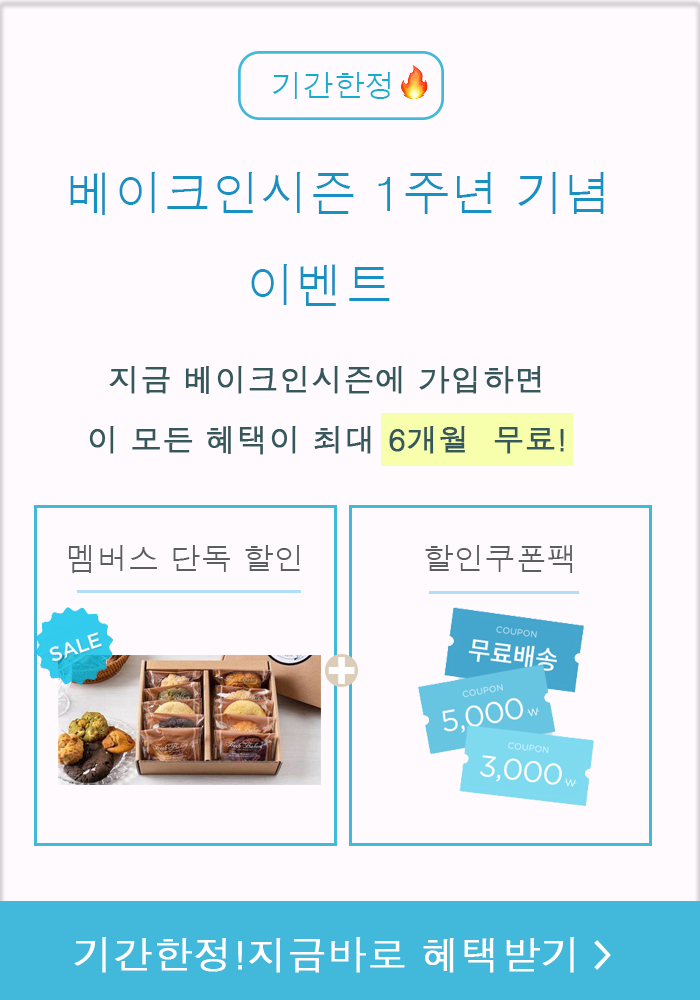
<style>
.page{position:relative;width:700px;height:1000px;background:#fffafe}
.page>*{position:absolute;margin:0}
.t1{font:31.1px "Dotum";color:#13adce}
.t2{font:48.6px "Dotum";color:#1791c1}
.t3{font:31.1px "Dotum";color:#35585c;font-weight:bold}
.t4{font:31.1px "Dotum";color:#5a5e5e}
.t5{font:56.3px "H2gtrE";color:#ffffff}
.t6{font:38.9px "Dotum";color:#ffffff;font-weight:bold}
.t7{font:38.9px "H2gtrE";color:#ffffff}
</style>
<div class="page">
<p class="t1" style="left:273px;top:72px;width:118px;height:27px">기간한정</p>
<p class="t2" style="left:70px;top:172px;width:534px;height:43px">베이크인시즌 1주년 기념</p>
<p class="t2" style="left:251px;top:264px;width:139px;height:42px">이벤트</p>
<p class="t3" style="left:109px;top:366px;width:432px;height:28px">지금 베이크인시즌에 가입하면</p>
<p class="t3" style="left:89px;top:426px;width:475px;height:29px">이 모든 혜택이 최대 6개월  무료!</p>
<p class="t4" style="left:68px;top:545px;width:232px;height:28px">멤버스 단독 할인</p>
<p class="t4" style="left:425px;top:545px;width:148px;height:28px">할인쿠폰팩</p>
<p class="t5" style="left:328px;top:657px;width:27px;height:27px">+</p>
<p class="t6" style="left:74px;top:937px;width:500px;height:36px">기간한정!지금바로 혜택받기</p>
<p class="t7" style="left:594px;top:940px;width:17px;height:30px">&gt;</p>
</div>
